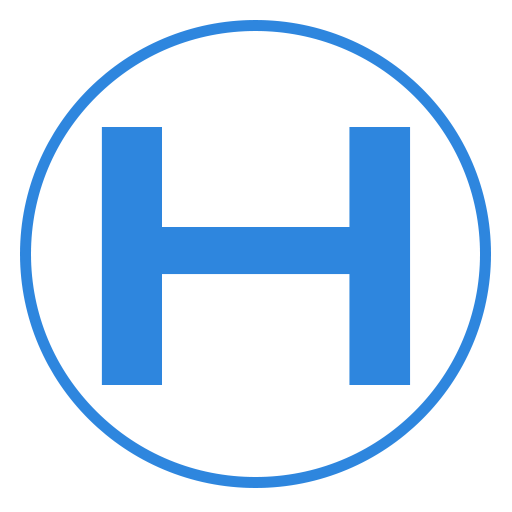
<style>
.page{position:relative;width:512px;height:512px;background:#ffffff}
.page>*{position:absolute;margin:0}
.t1{font:500px "BankGothicBT-Medium";letter-spacing:0.05em;color:#2e86de}
</style>
<div class="page">
<p class="t1" style="left:101px;top:127px;width:310px;height:258px">H</p>
</div>
